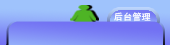
<style>
.page{position:relative;width:170px;height:45px}
.page>*{position:absolute;margin:0}
.t1{font:9.3px "SimHei";color:#ffffff}
</style>
<div class="page">
<p class="t1" style="left:114px;top:12px;width:37px;height:10px">后台管理</p>
</div>
